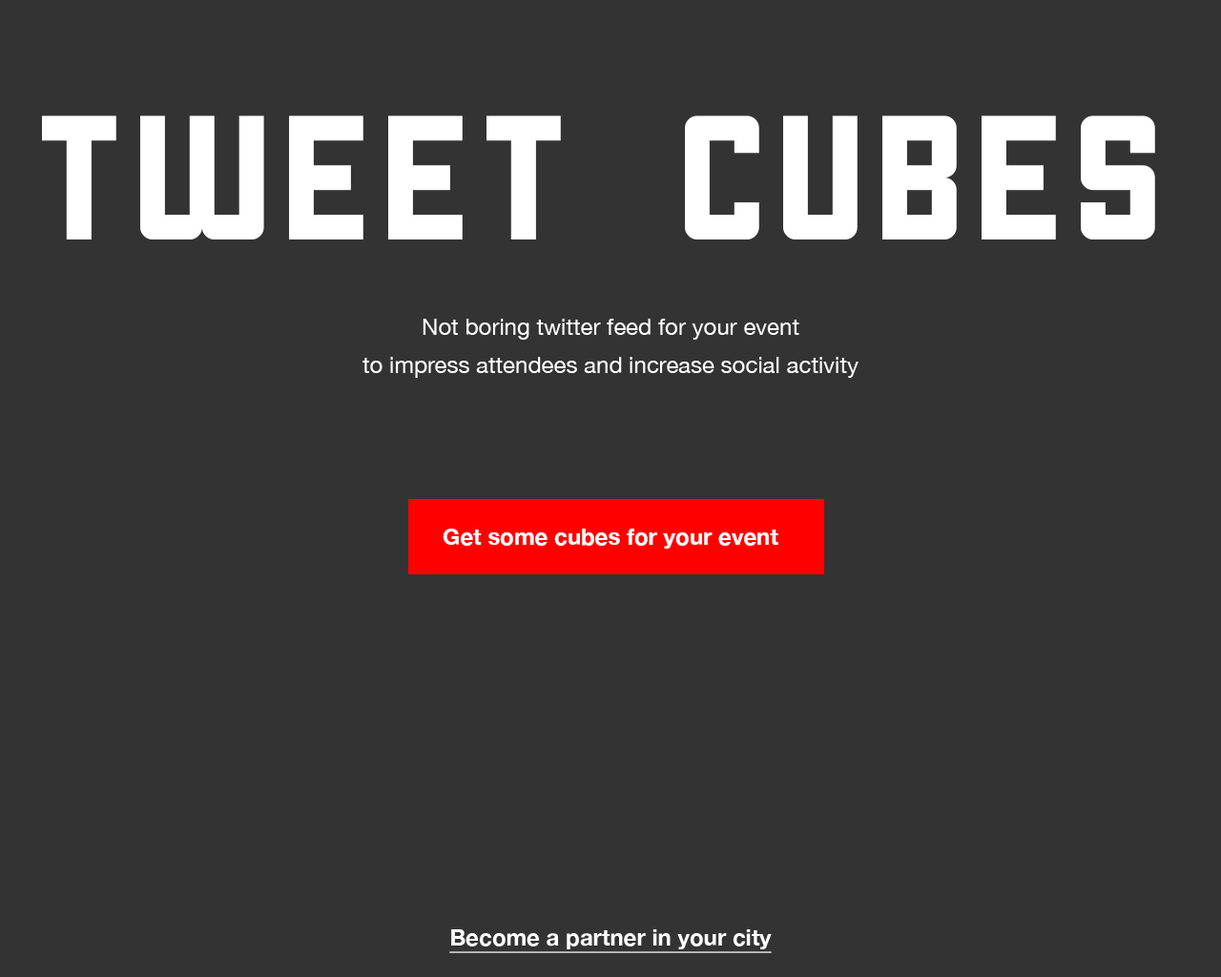
<style>
.page{position:relative;width:1221px;height:977px;background:#333333}
.page>*{position:absolute;margin:0}
.t1{font:22.9px/19.1px "HelveticaNeue";color:#ffffff}
.t2{font:171.7px/124px "Cornerstone";color:#ffffff}
.t3{font:22.9px/19.1px "HelveticaNeue-Bold";color:#ffffff}
.t4{font:22.9px/19.1px "HelveticaNeue-Bold";color:#ffffff;text-decoration:underline}
</style>
<div class="page">
<p class="t1" style="left:42px;top:115px;width:1113px;height:838px;text-align:center"><span class="t2">TWEET CUBES<br><br><br></span><br><br>Not boring twitter feed for your event<br><br>to impress attendees and increase social activity<br><br><br><br><br><br><br><br><br><span class="t3">Get some cubes for your event<br><br><br><br><br><br><br><br><br><br><br><br><br><br><br><br><br><br><br><br><br></span><span class="t4">Become a partner in your city</span></p>
</div>
